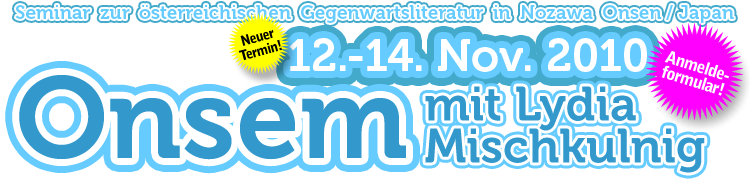
<style>
.page{position:relative;width:750px;height:180px;background:#ffffff}
.page>*{position:absolute;margin:0}
.t1{font:19px "Museo-700";color:#66ccff}
.t2{font:14px/14px "BellGothicStd-Black";letter-spacing:-0.05em;color:#000000}
.t3{font:45px "Museo-700";color:#ffffff}
.t4{font:17.2px/15.5px "BellGothicStd-Black";letter-spacing:-0.05em;color:#ffffff}
.t5{font:115px "Museo-700";color:#3399cc}
.t6{font:48px/42px "Museo-700";color:#3399cc}
</style>
<div class="page">
<p class="t1" style="left:15px;top:5px;width:719px;height:18px">Seminar zur österreichischen Gegenwartsliteratur in Nozawa Onsen / Japan</p>
<p class="t1" style="left:15px;top:5px;width:719px;height:18px">Seminar zur österreichischen Gegenwartsliteratur in Nozawa Onsen / Japan</p>
<p class="t2" style="left:238px;top:29px;width:44px;height:32px;text-align:center;rotate:-15deg">Neuer<br>Termin!</p>
<p class="t3" style="left:289px;top:39px;width:358px;height:34px">12.-14. Nov. 2010</p>
<p class="t3" style="left:289px;top:38px;width:358px;height:34px">12.-14. Nov. 2010</p>
<p class="t4" style="left:661px;top:51px;width:68px;height:45px;text-align:center;rotate:17deg">Anmelde-<br>formular!</p>
<p class="t5" style="left:19px;top:75px;width:387px;height:85px">Onsem</p>
<p class="t5" style="left:19px;top:75px;width:387px;height:85px">Onsem</p>
<p class="t6" style="left:425px;top:86px;width:280px;height:87px">mit Lydia<br>Mischkulnig</p>
<p class="t6" style="left:425px;top:86px;width:280px;height:87px">mit Lydia <br>Mischkulnig</p>
</div>
